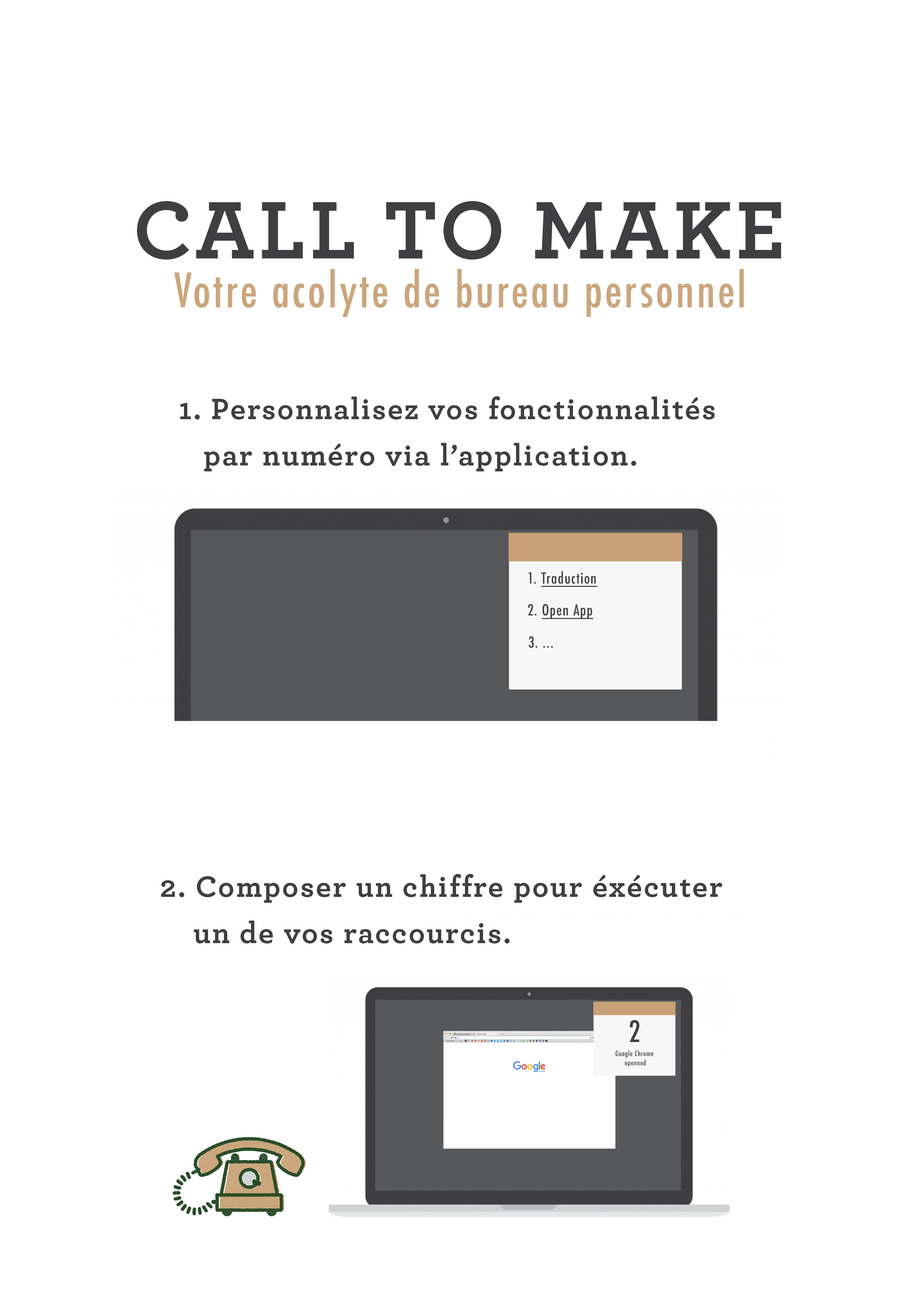
<style>
.page{position:relative;width:918px;height:1299px;background:#ffffff}
.page>*{position:absolute;margin:0}
.t1{font:85.5px "Archer-Bold";letter-spacing:0.05em;color:#3f3f41}
.t2{font:46.3px "Futura-CondensedMedium";letter-spacing:0.05em;color:#caa67d}
.t3{font:30.9px/46.3px "Archer-Bold";letter-spacing:0.05em;color:#3f3f41}
.t4{font:14.9px "Futura-CondensedMedium";letter-spacing:0.05em;color:#3f3f41;text-decoration:underline}
.t5{font:14.9px "Futura-CondensedMedium";letter-spacing:0.05em;color:#3f3f41}
.t6{font:28.7px "Futura-CondensedMedium";letter-spacing:0.05em;color:#3f3f41}
.t7{font:7px/9.3px "Futura-CondensedMedium";letter-spacing:0.05em;color:#3f3f41}
</style>
<div class="page">
<p class="t1" style="left:137px;top:201px;width:645px;height:59px">CALL TO MAKE</p>
<p class="t2" style="left:174px;top:269px;width:570px;height:48px">Votre acolyte de bureau personnel</p>
<p class="t3" style="left:180px;top:396px;width:535px;height:75px">1. Personnalisez vos fonctionnalités<br>   par numéro via l’application.</p>
<p class="t4" style="left:529px;top:571px;width:69px;height:16px"><span class="t5">1. </span>Traduction</p>
<p class="t4" style="left:528px;top:604px;width:65px;height:15px"><span class="t5">2. </span>Open App</p>
<p class="t5" style="left:529px;top:636px;width:24px;height:12px">3. ...</p>
<p class="t3" style="left:161px;top:874px;width:561px;height:69px">2. Composer un chiffre pour éxécuter<br>    un de vos raccourcis.</p>
<p class="t6" style="left:630px;top:1020px;width:10px;height:22px">2</p>
<p class="t7" style="left:615px;top:1050px;width:39px;height:17px;text-align:center">Google Chrome<br> openned</p>
</div>
